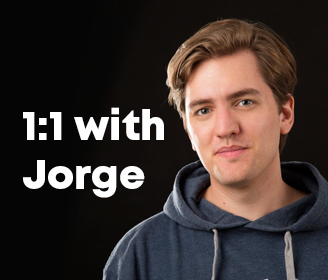
<style>
.page{position:relative;width:328px;height:280px;background:#050505}
.page>*{position:absolute;margin:0}
.t1{font:41px "Mont-HeavyDEMO";color:#ffffff}
</style>
<div class="page">
<p class="t1" style="left:23px;top:107px;width:141px;height:91px">1:1 with<br>Jorge</p>
</div>
